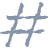
<style>
.page{position:relative;width:48px;height:48px;background:#ffffff}
.page>*{position:absolute;margin:0}
.t1{font:80.8px "Gigi-Regular";color:#8795ab}
</style>
<div class="page">
<p class="t1" style="left:0px;top:2px;width:48px;height:45px">#</p>
</div>
